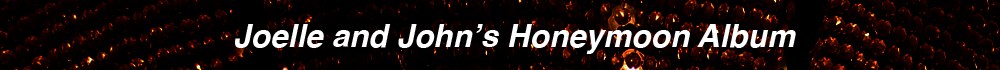
<style>
.page{position:relative;width:1000px;height:70px;background:#000000}
.page>*{position:absolute;margin:0}
.t1{font:31.6px "Helvetica-BoldOblique";color:#ffffff}
</style>
<div class="page">
<p class="t1" style="left:235px;top:24px;width:561px;height:30px">Joelle and John’s Honeymoon Album</p>
</div>
